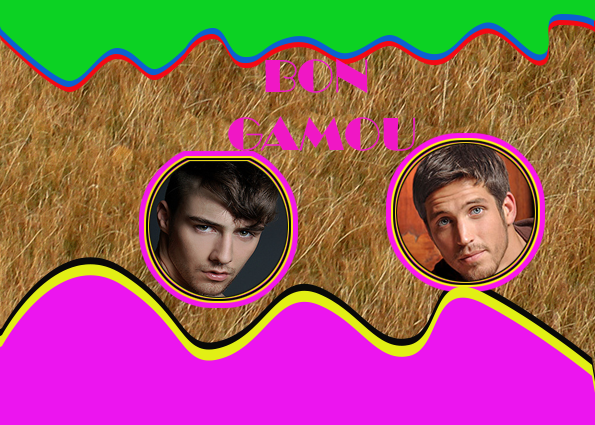
<style>
.page{position:relative;width:595px;height:425px;background:#ec15ef}
.page>*{position:absolute;margin:0}
.t1{font:48px "Broadway";color:#f017c5}
</style>
<div class="page">
<p class="t1" style="left:228px;top:58px;width:187px;height:93px;text-align:center">BON <br>GAMOU</p>
</div>
